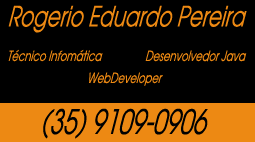
<style>
.page{position:relative;width:255px;height:142px;background:#000000}
.page>*{position:absolute;margin:0}
.t1{font:28px "AvantGarde-BookOblique";color:#ed8913;font-style:italic;scale:0.71 1}
.t2{font:14px "AvantGarde-BookOblique";color:#ed8913;font-style:italic;scale:0.71 1}
.t3{font:33.6px "AvantGarde-BookOblique";color:#010101;font-style:italic;scale:0.71 1}
</style>
<div class="page">
<p class="t1" style="left:8px;top:5px;width:239px;height:28px">Rogerio Eduardo Pereira</p>
<p class="t2" style="left:8px;top:49px;width:95px;height:13px">Técnico Infomática</p>
<p class="t2" style="left:145px;top:50px;width:102px;height:12px">Desenvolvedor Java</p>
<p class="t2" style="left:89px;top:72px;width:74px;height:14px">WebDeveloper</p>
<p class="t3" style="left:43px;top:108px;width:165px;height:31px">(35) 9109-0906</p>
</div>
